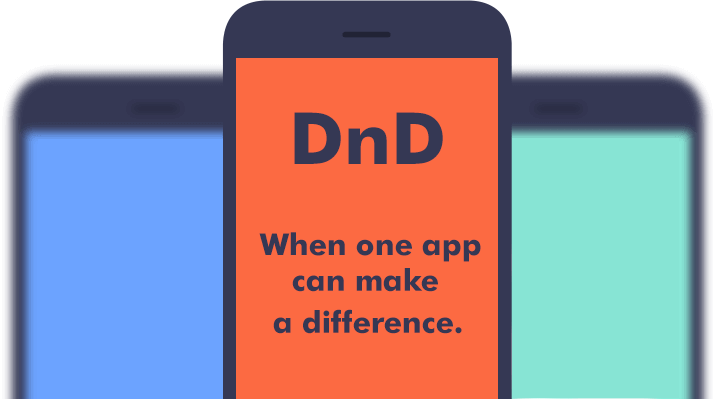
<style>
.page{position:relative;width:716px;height:399px;background:#fc6a42}
.page>*{position:absolute;margin:0}
.t1{font:72px "FuturaBT-Bold";color:#353854}
.t2{font:30px "FuturaBT-Bold";color:#353854}
</style>
<div class="page">
<p class="t1" style="left:294px;top:112px;width:149px;height:52px">DnD</p>
<p class="t2" style="left:259px;top:232px;width:222px;height:30px">When one app</p>
<p class="t2" style="left:292px;top:268px;width:146px;height:24px">can make</p>
<p class="t2" style="left:273px;top:309px;width:189px;height:25px">a difference.</p>
</div>
